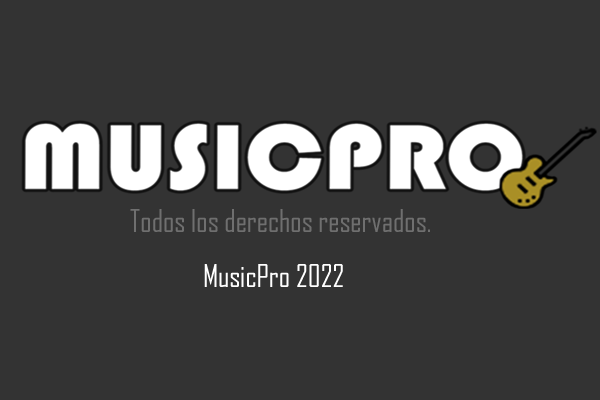
<style>
.page{position:relative;width:600px;height:400px;background:#333333}
.page>*{position:absolute;margin:0}
.t1{font:30px "AgencyFB-Reg";color:#6f6f6f}
.t2{font:30px "AgencyFB-Reg";color:#ffffff}
</style>
<div class="page">
<p class="t1" style="left:130px;top:209px;width:300px;height:23px">Todos los derechos reservados.</p>
<p class="t2" style="left:204px;top:264px;width:139px;height:23px">MusicPro 2022</p>
</div>
